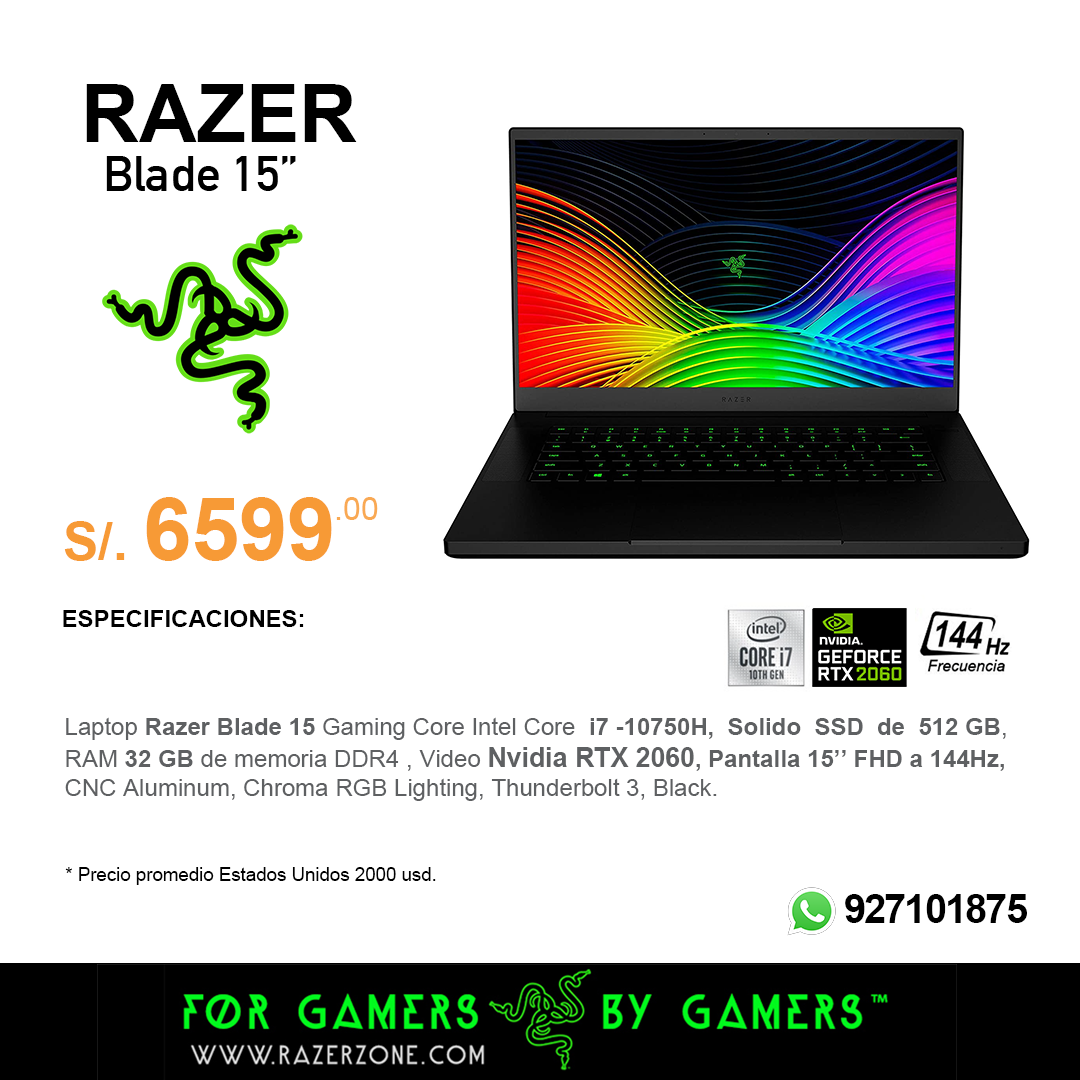
<style>
.page{position:relative;width:1080px;height:1080px;background:#ffffff}
.page>*{position:absolute;margin:0}
.t1{font:80px "Arial-BoldMT";color:#000000}
.t2{font:49.3px "DINAlternate-Bold";color:#000000}
.t3{font:86.7px "Arial-BoldMT";color:#f79a36}
.t4{font:53.3px "Arial-BoldMT";color:#f79a36}
.t5{font:32px "ArialMT";color:#f9a953}
.t6{font:24px "Arial-BoldMT";color:#000000}
.t7{font:24px "ArialMT";color:#5e6062}
.t8{font:24px "Arial-BoldMT";color:#5e6062}
.t9{font:26.7px "Arial-BoldMT";color:#5e6062}
.t10{font:18.7px "ArialMT";color:#000000}
.t11{font:40px "Arial-BoldMT";letter-spacing:-0.05em;color:#000000}
</style>
<div class="page">
<p class="t1" style="left:86px;top:84px;width:271px;height:58px">RAZER</p>
<p class="t2" style="left:106px;top:156px;width:190px;height:35px">Blade 15’’</p>
<p class="t3" style="left:64px;top:497px;width:268px;height:64px"><span class="t4">S/. </span>6599</p>
<p class="t5" style="left:336px;top:497px;width:42px;height:23px">.00</p>
<p class="t6" style="left:63px;top:610px;width:241px;height:17px">ESPECIFICACIONES:</p>
<p class="t7" style="left:65px;top:717px;width:941px;height:84px">Laptop <span class="t8">Razer Blade 15</span> Gaming Core Intel Core  <span class="t8">i7 -10750H,  Solido  SSD  de  512 GB</span>, <br>RAM <span class="t8">32 GB </span>de memoria DDR4 , Video <span class="t9">Nvidia RTX 2060</span><span class="t8">, Pantalla 15’’ FHD a 144Hz, <br></span>CNC Aluminum, Chroma RGB Lighting, Thunderbolt 3, Black.</p>
<p class="t10" style="left:65px;top:867px;width:371px;height:18px">* Precio promedio Estados Unidos 2000 usd.</p>
<p class="t11" style="left:845px;top:894px;width:182px;height:29px">927101875</p>
</div>
